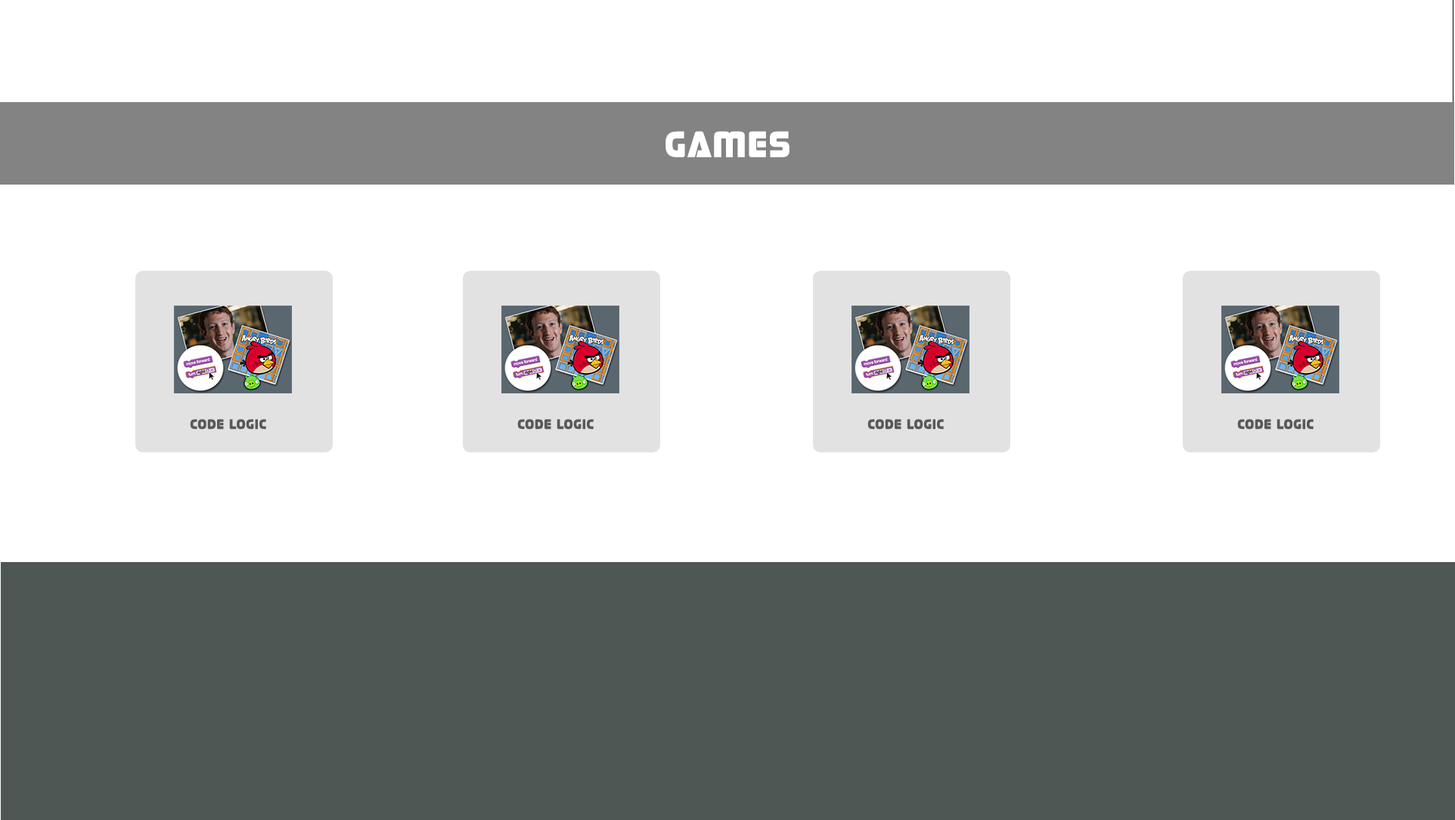
<style>
.page{position:relative;width:1455px;height:820px;background:#ffffff}
.page>*{position:absolute;margin:0}
.t1{font:36.3px "Stormfaze-Regular";color:#ffffff}
.t2{font:13.6px "Stormfaze-Regular";color:#595959}
</style>
<div class="page">
<p class="t1" style="left:665px;top:131px;width:124px;height:26px">Games</p>
<p class="t2" style="left:190px;top:419px;width:76px;height:10px">Code Logic</p>
<p class="t2" style="left:517px;top:419px;width:77px;height:10px">Code Logic</p>
<p class="t2" style="left:867px;top:419px;width:77px;height:10px">Code Logic</p>
<p class="t2" style="left:1237px;top:419px;width:76px;height:10px">Code Logic</p>
</div>
